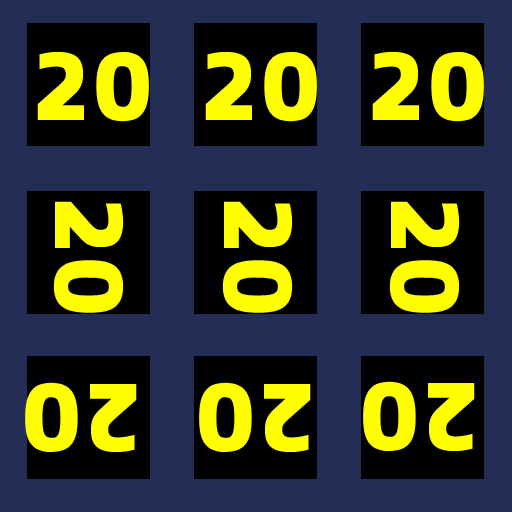
<style>
.page{position:relative;width:512px;height:512px;background:#242d56}
.page>*{position:absolute;margin:0}
.t1{font:130px "Share-BoldOSF";color:#ffff00}
</style>
<div class="page">
<p class="t1" style="left:37px;top:51px;width:112px;height:71px">20</p>
<p class="t1" style="left:205px;top:51px;width:112px;height:71px">20</p>
<p class="t1" style="left:372px;top:51px;width:112px;height:71px">20</p>
<p class="t1" style="left:53px;top:201px;width:71px;height:112px;rotate:90deg">20</p>
<p class="t1" style="left:222px;top:201px;width:71px;height:112px;rotate:90deg">20</p>
<p class="t1" style="left:389px;top:201px;width:71px;height:112px;rotate:90deg">20</p>
<p class="t1" style="left:25px;top:382px;width:112px;height:71px;rotate:-180deg">20</p>
<p class="t1" style="left:199px;top:382px;width:112px;height:71px;rotate:-180deg">20</p>
<p class="t1" style="left:363px;top:381px;width:112px;height:71px;rotate:-180deg">20</p>
</div>
